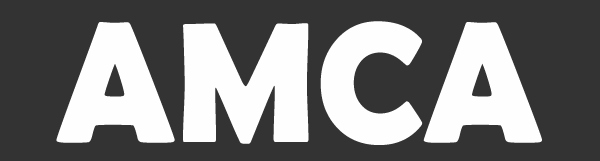
<style>
.page{position:relative;width:600px;height:161px;background:#333333}
.page>*{position:absolute;margin:0}
.t1{font:172px "BerlinSansFBDemi-Bold";color:#fefefe}
</style>
<div class="page">
<p class="t1" style="left:56px;top:21px;width:486px;height:124px">AMCA</p>
</div>
